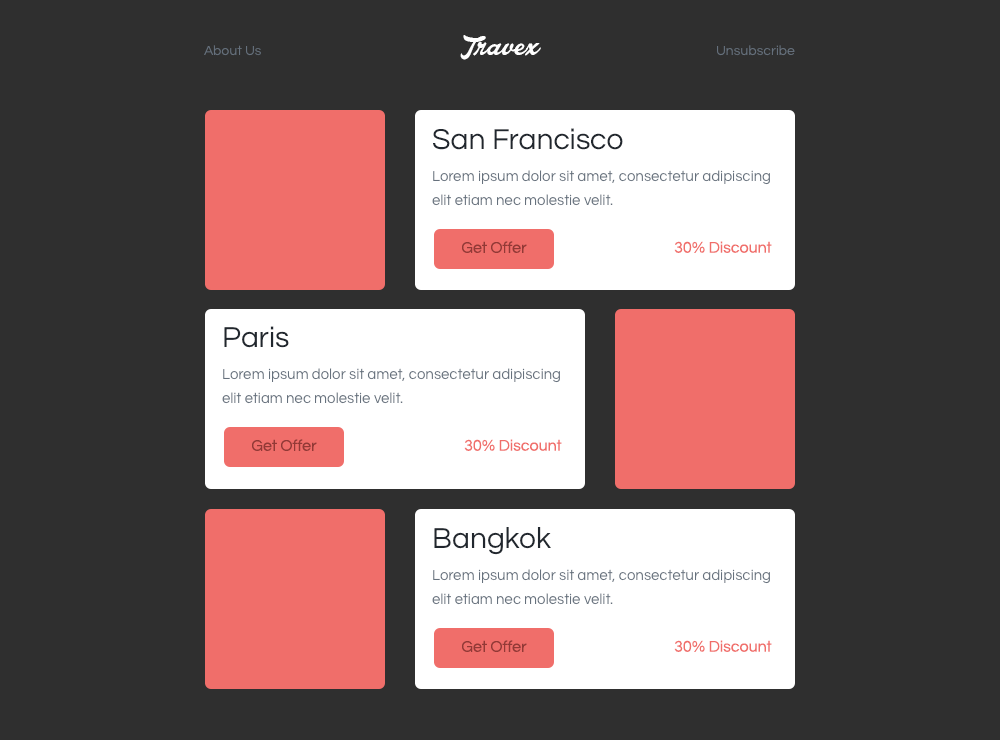
<style>
.page{position:relative;width:1000px;height:740px;background:#2f2f2f}
.page>*{position:absolute;margin:0}
.t1{font:30px "LakesightPersonalUseOnly";color:#ffffff}
.t2{font:14px "Questrial-Regular";color:#66717d}
.t3{font:30px "Questrial-Regular";color:#21272e}
.t4{font:15px/24px "Questrial-Regular";color:#66717d}
.t5{font:16px "Questrial-Regular";color:#923936}
.t6{font:16px "Questrial-Regular";color:#f06e6a}
</style>
<div class="page">
<p class="t1" style="left:460px;top:35px;width:81px;height:25px">Travex</p>
<p class="t2" style="left:204px;top:45px;width:57px;height:11px">About Us</p>
<p class="t2" style="left:717px;top:45px;width:78px;height:11px">Unsubscribe</p>
<p class="t3" style="left:433px;top:128px;width:190px;height:22px">San Francisco</p>
<p class="t4" style="left:432px;top:170px;width:338px;height:36px">Lorem ipsum dolor sit amet, consectetur adipiscing elit etiam nec molestie velit.</p>
<p class="t5" style="left:462px;top:241px;width:65px;height:12px">Get Offer</p>
<p class="t6" style="left:674px;top:241px;width:98px;height:12px">30% Discount</p>
<p class="t3" style="left:224px;top:326px;width:65px;height:22px">Paris</p>
<p class="t4" style="left:222px;top:368px;width:338px;height:36px">Lorem ipsum dolor sit amet, consectetur adipiscing elit etiam nec molestie velit.</p>
<p class="t5" style="left:252px;top:439px;width:65px;height:12px">Get Offer</p>
<p class="t6" style="left:464px;top:439px;width:98px;height:12px">30% Discount</p>
<p class="t3" style="left:434px;top:527px;width:117px;height:28px">Bangkok</p>
<p class="t4" style="left:432px;top:569px;width:338px;height:36px">Lorem ipsum dolor sit amet, consectetur adipiscing elit etiam nec molestie velit.</p>
<p class="t5" style="left:462px;top:640px;width:65px;height:12px">Get Offer</p>
<p class="t6" style="left:674px;top:640px;width:98px;height:12px">30% Discount</p>
</div>
